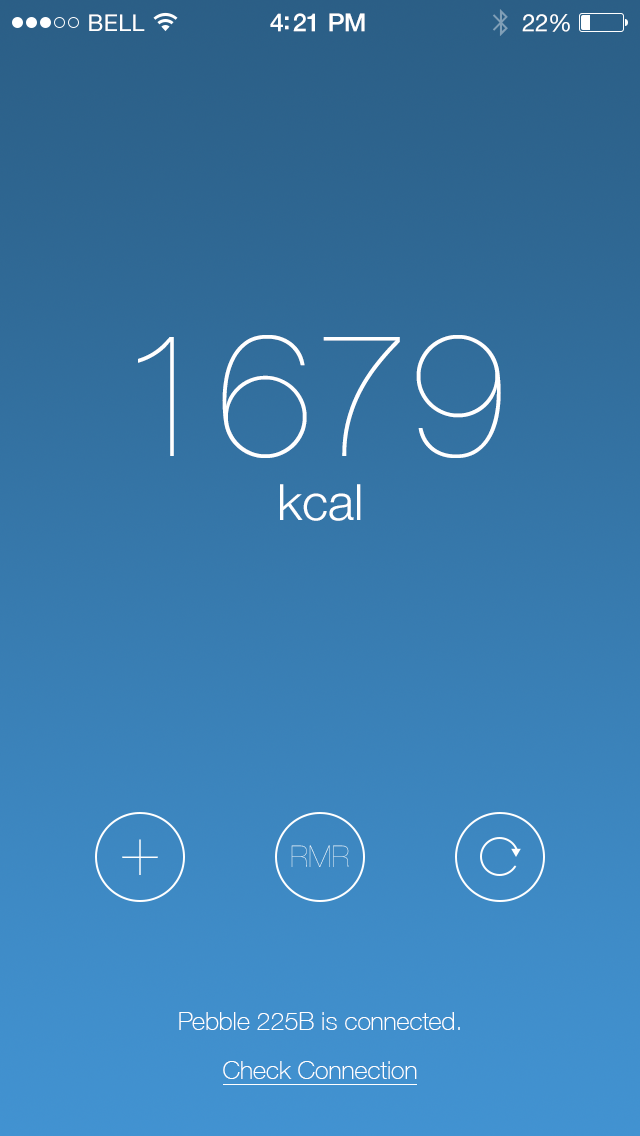
<style>
.page{position:relative;width:640px;height:1136px}
.page>*{position:absolute;margin:0}
.t1{font:23px "HelveticaNeue";letter-spacing:0.02em;color:#ffffff}
.t2{font:25px "HelveticaNeue-Medium";letter-spacing:-0.02em;color:#ffffff}
.t3{font:24px "HelveticaNeue";letter-spacing:-0.02em;color:#ffffff}
.t4{font:175px "HelveticaNeue-UltraLight";color:#ffffff}
.t5{font:50px "HelveticaNeue-Light";color:#ffffff}
.t6{font:25px "HelveticaNeue-Thin";color:#ffffff}
</style>
<div class="page">
<p class="t1" style="left:89px;top:14px;width:56px;height:17px">BELL</p>
<p class="t2" style="left:270px;top:13px;width:95px;height:19px">4:21 PM</p>
<p class="t3" style="left:522px;top:14px;width:48px;height:18px">22%</p>
<p class="t4" style="left:138px;top:335px;width:363px;height:123px">1679</p>
<p class="t5" style="left:280px;top:484px;width:81px;height:37px">kcal</p>
<p class="t6" style="left:179px;top:1012px;width:281px;height:18px">Pebble 225B is connected.</p>
<p class="t6" style="left:223px;top:1061px;width:194px;height:18px">Check Connection</p>
</div>
